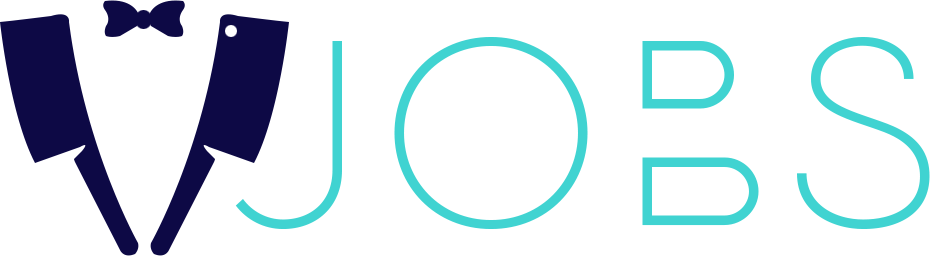
<style>
.page{position:relative;width:930px;height:256px;background:#ffffff}
.page>*{position:absolute;margin:0}
.t1{font:262.9px "Lombok";letter-spacing:0.038em;color:#40d3d1}
</style>
<div class="page">
<p class="t1" style="left:235px;top:37px;width:695px;height:192px">Jobs</p>
</div>
